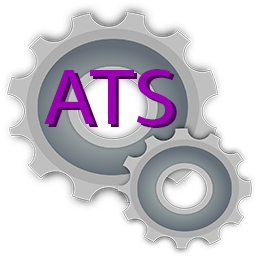
<style>
.page{position:relative;width:256px;height:256px;background:#ffffff}
.page>*{position:absolute;margin:0}
.t1{font:80px "MyriadPro-Regular";color:#9b00b2;scale:1.1 1}
.t2{font:80px "MyriadPro-Regular";scale:1.1 1}
</style>
<div class="page">
<p class="t1" style="left:44px;top:69px;width:129px;height:56px">ATS</p>
<p class="t2" style="left:48px;top:72px;width:129px;height:56px">ATS</p>
</div>
